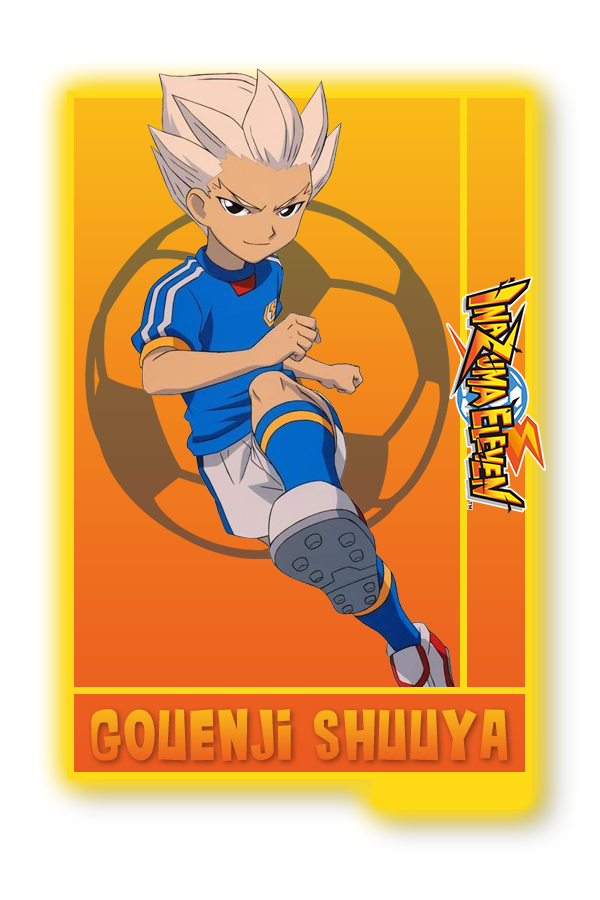
<style>
.page{position:relative;width:600px;height:900px;background:#ffffff}
.page>*{position:absolute;margin:0}
.t1{font:75px "TTG-Bold"}
</style>
<div class="page">
<p class="t1" style="left:91px;top:708px;width:417px;height:53px">Gouenji Shuuya</p>
</div>
